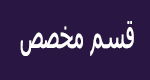
<style>
.page{position:relative;width:150px;height:80px;background:#2a1642}
.page>*{position:absolute;margin:0}
.t1{font:38.4px "Tahoma";color:#ffffff;scale:0.53 1}
</style>
<div class="page">
<p class="t1" style="left:20px;top:21px;width:114px;height:35px">قسم مخصص</p>
</div>
